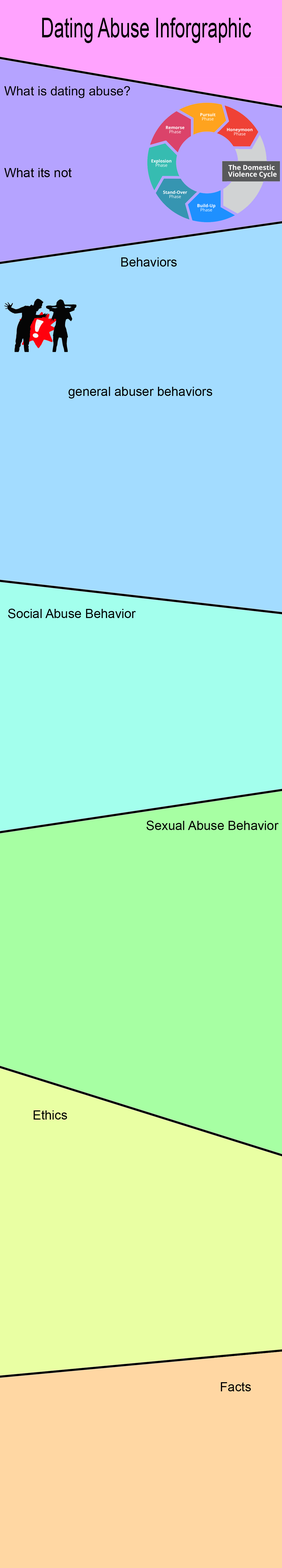
<style>
.page{position:relative;width:282px;height:1568px;background:#a3dcff}
.page>*{position:absolute;margin:0}
.t1{font:27.4px "ArialMT";color:#000000;scale:0.67 1}
.t2{font:12.8px "ArialMT";color:#000000}
</style>
<div class="page">
<p class="t1" style="left:42px;top:18px;width:209px;height:25px">Dating Abuse Inforgraphic</p>
<p class="t2" style="left:4px;top:86px;width:126px;height:12px">What is dating abuse?</p>
<p class="t2" style="left:4px;top:168px;width:68px;height:9px">What its not</p>
<p class="t2" style="left:121px;top:257px;width:56px;height:10px">Behaviors</p>
<p class="t2" style="left:68px;top:387px;width:144px;height:12px">general abuser behaviors</p>
<p class="t2" style="left:8px;top:609px;width:128px;height:9px">Social Abuse Behavior</p>
<p class="t2" style="left:147px;top:821px;width:132px;height:9px">Sexual Abuse Behavior</p>
<p class="t2" style="left:33px;top:1110px;width:34px;height:10px">Ethics</p>
<p class="t2" style="left:221px;top:1382px;width:30px;height:9px">Facts</p>
</div>
